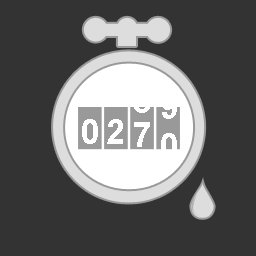
<style>
.page{position:relative;width:256px;height:256px;background:#333333}
.page>*{position:absolute;margin:0}
.t1{font:34.3px "Arial-BoldMT";color:#ffffff}
</style>
<div class="page">
<p class="t1" style="left:134px;top:88px;width:16px;height:25px">8</p>
<p class="t1" style="left:161px;top:94px;width:16px;height:25px">9</p>
<p class="t1" style="left:82px;top:119px;width:16px;height:25px">0</p>
<p class="t1" style="left:107px;top:119px;width:16px;height:25px">2</p>
<p class="t1" style="left:134px;top:122px;width:16px;height:25px">7</p>
<p class="t1" style="left:161px;top:133px;width:16px;height:25px">0</p>
</div>
